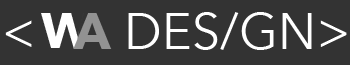
<style>
.page{position:relative;width:350px;height:65px;background:#333333}
.page>*{position:absolute;margin:0}
.t1{font:50.8px "AvenirNext-Regular";color:#ffffff}
.t2{font:12.2px "AvenirNext-Bold";color:#929292}
</style>
<div class="page">
<p class="t1" style="left:5px;top:12px;width:342px;height:38px">&lt;       DES/GN&gt;</p>
<p class="t2" style="left:73px;top:13px;width:39px;height:36px;text-align:center">A</p>
</div>
